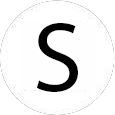
<style>
.page{position:relative;width:115px;height:115px;background:#ffffff}
.page>*{position:absolute;margin:0}
.t1{font:100px "MyriadPro-Regular";color:#000000}
</style>
<div class="page">
<p class="t1" style="left:36px;top:23px;width:42px;height:69px">S</p>
</div>
